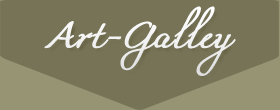
<style>
.page{position:relative;width:280px;height:110px;background:#767357}
.page>*{position:absolute;margin:0}
.t1{font:56px "Miama";color:#f2f2f2;font-weight:bold}
</style>
<div class="page">
<p class="t1" style="left:44px;top:6px;width:192px;height:70px">Art-Galley</p>
</div>
